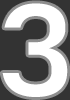
<style>
.page{position:relative;width:70px;height:100px;background:#333333}
.page>*{position:absolute;margin:0}
.t1{font:128.8px "Bahnschrift";color:#ffffff;scale:1.2 1}
</style>
<div class="page">
<p class="t1" style="left:2px;top:3px;width:66px;height:94px">3</p>
</div>
